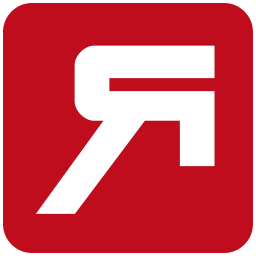
<style>
.page{position:relative;width:256px;height:256px;background:#c00d1e}
.page>*{position:absolute;margin:0}
.t1{font:239.3px "SpaceRanger";color:#ffffff}
</style>
<div class="page">
<p class="t1" style="left:36px;top:45px;width:179px;height:169px;rotate:180deg">R</p>
</div>
